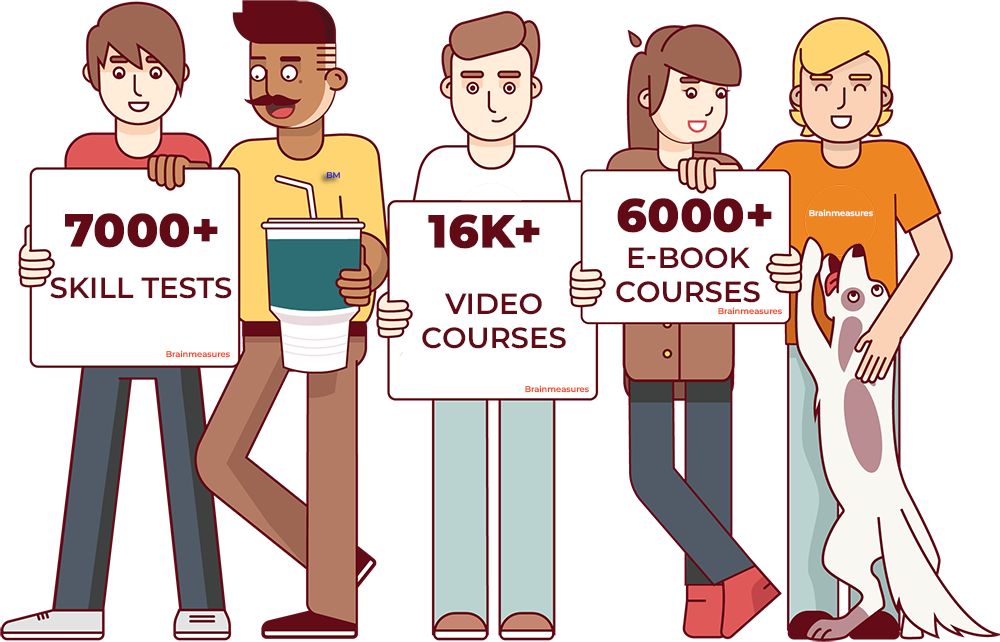
<style>
.page{position:relative;width:1000px;height:642px;background:#ffffff}
.page>*{position:absolute;margin:0}
.t1{font:45.8px "Montserrat-ExtraBold";color:#630a17;font-weight:bold}
.t2{font:29.2px "Montserrat-SemiBold";color:#630a17;text-transform:uppercase}
</style>
<div class="page">
<p class="t1" style="left:617px;top:198px;width:155px;height:35px">6000+</p>
<p class="t1" style="left:65px;top:213px;width:153px;height:35px">7000+</p>
<p class="t1" style="left:428px;top:214px;width:112px;height:35px">16K+</p>
<p class="t2" style="left:616px;top:247px;width:144px;height:56px;text-align:center">E-Book<br>Courses</p>
<p class="t2" style="left:50px;top:277px;width:182px;height:22px">Skill Tests</p>
<p class="t2" style="left:422px;top:293px;width:144px;height:56px;text-align:center">Video<br>Courses</p>
</div>
